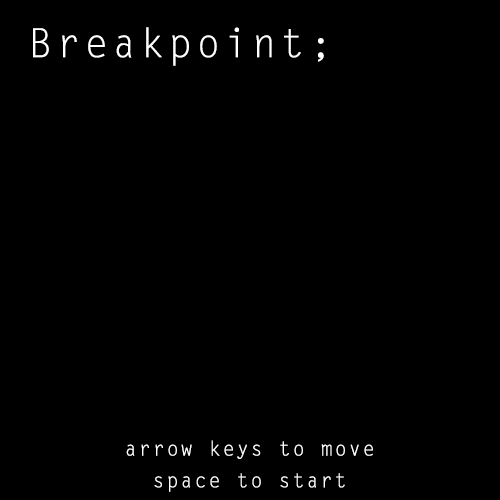
<style>
.page{position:relative;width:500px;height:500px;background:#000000}
.page>*{position:absolute;margin:0}
.t1{font:40px "LetterGothicStd";letter-spacing:0.1em;color:#ffffff}
.t2{font:20px "LetterGothicStd";letter-spacing:0.1em;color:#ffffff}
</style>
<div class="page">
<p class="t1" style="left:33px;top:27px;width:291px;height:39px">Breakpoint;</p>
<p class="t2" style="left:126px;top:440px;width:247px;height:19px">arrow keys to move</p>
<p class="t2" style="left:154px;top:473px;width:191px;height:19px">space to start</p>
</div>
